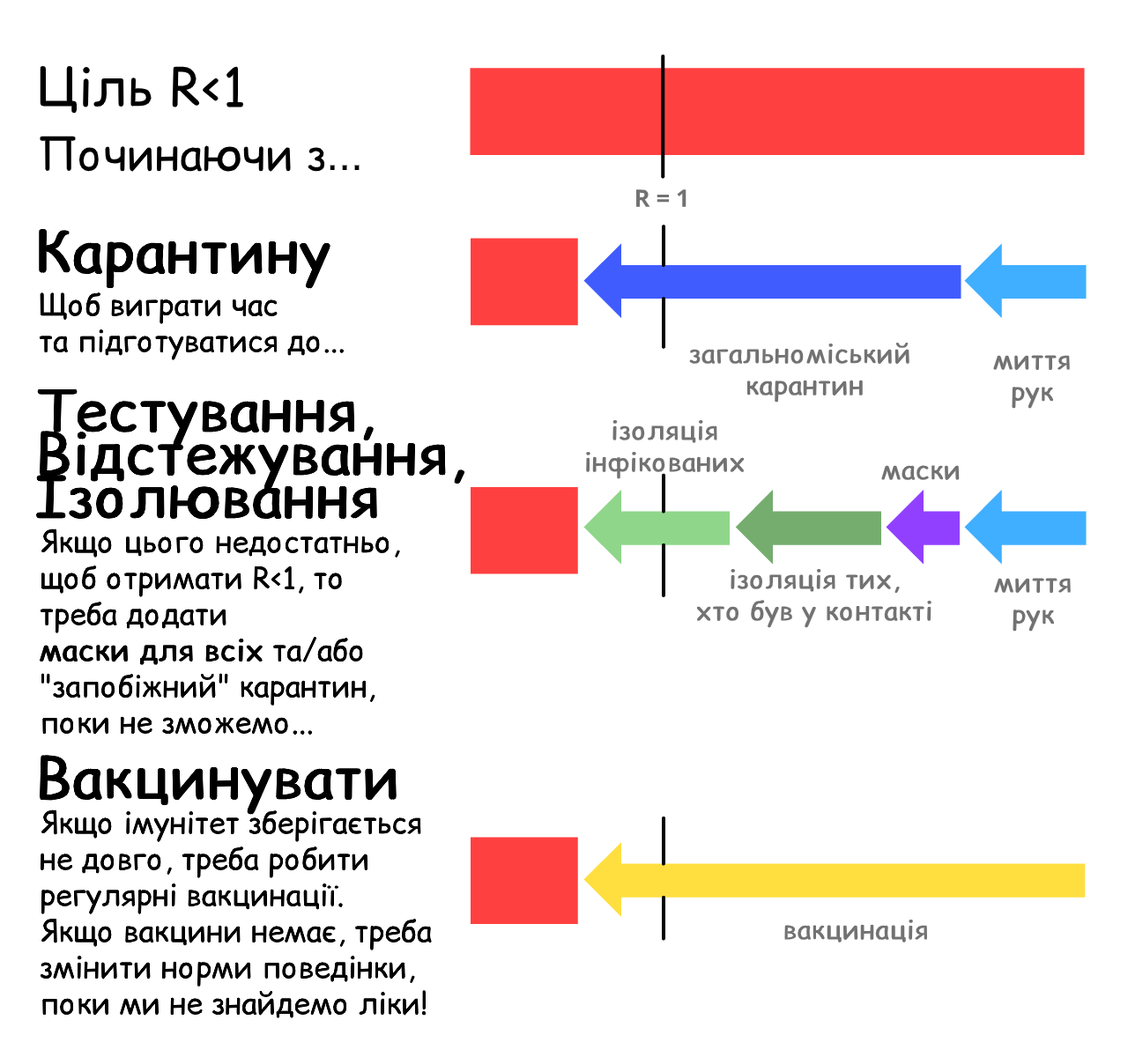
<style>
.page{position:relative;width:1128px;height:1057px;background:#ffffff}
.page>*{position:absolute;margin:0}
.t1{font:52.9px "ComicRelief";color:#000000}
.t2{font:44.1px "ComicRelief";color:#000000}
.t3{font:44.1px "ArialMT";color:#000000}
.t4{font:57.3px "ComicRelief";color:#000000;font-weight:bold}
.t5{font:30px/36.1px "ComicRelief";color:#000000}
.t6{font:26.4px "ComicRelief";color:#727272;font-weight:bold}
.t7{font:57.3px/43.2px "ComicRelief";color:#000000;font-weight:bold}
.t8{font:30px/36.1px "ComicRelief";color:#000000;font-weight:bold}
</style>
<div class="page">
<p class="t1" style="left:40px;top:65px;width:204px;height:49px">Ціль R&lt;1</p>
<p class="t2" style="left:40px;top:136px;width:319px;height:37px">Починаючи з<span class="t3">...</span></p>
<p class="t4" style="left:39px;top:229px;width:292px;height:61px">Карантину</p>
<p class="t5" style="left:40px;top:292px;width:304px;height:69px">Щоб виграти час<br>та підготуватися до...</p>
<p class="t6" style="left:689px;top:342px;width:220px;height:61px;text-align:center">загальноміський <br>карантин</p>
<p class="t6" style="left:993px;top:355px;width:77px;height:54px;text-align:center">миття<br>рук</p>
<p class="t7" style="left:36px;top:389px;width:429px;height:132px">Тестування, <br>Відстежування, <br>Ізолювання</p>
<p class="t6" style="left:586px;top:420px;width:159px;height:59px;text-align:center">ізоляція<br>інфікованих</p>
<p class="t6" style="left:881px;top:464px;width:79px;height:17px">маски</p>
<p class="t5" style="left:39px;top:529px;width:361px;height:206px">Якщо цього недостатньо, <br>щоб отримати R&lt;1, то <br>треба додати <br><span class="t8">маски для всіх </span>та/aбo <br>"запобіжний" карантин,<br>поки не зможемо...</p>
<p class="t6" style="left:696px;top:569px;width:235px;height:59px;text-align:center">ізоляція тих,<br>хто був у контакті</p>
<p class="t6" style="left:994px;top:578px;width:77px;height:54px;text-align:center">миття<br>рук</p>
<p class="t4" style="left:40px;top:755px;width:356px;height:61px">Вакцинувати</p>
<p class="t5" style="left:41px;top:810px;width:392px;height:209px">Якщо імунітет зберігається <br>не довго, треба робити <br>регулярні вакцинації. <br>Якщо вакцини немає, треба <br>змінити норми поведінки, <br>поки ми не знайдемо ліки!</p>
<p class="t6" style="left:784px;top:920px;width:144px;height:23px">вакцинація</p>
</div>
